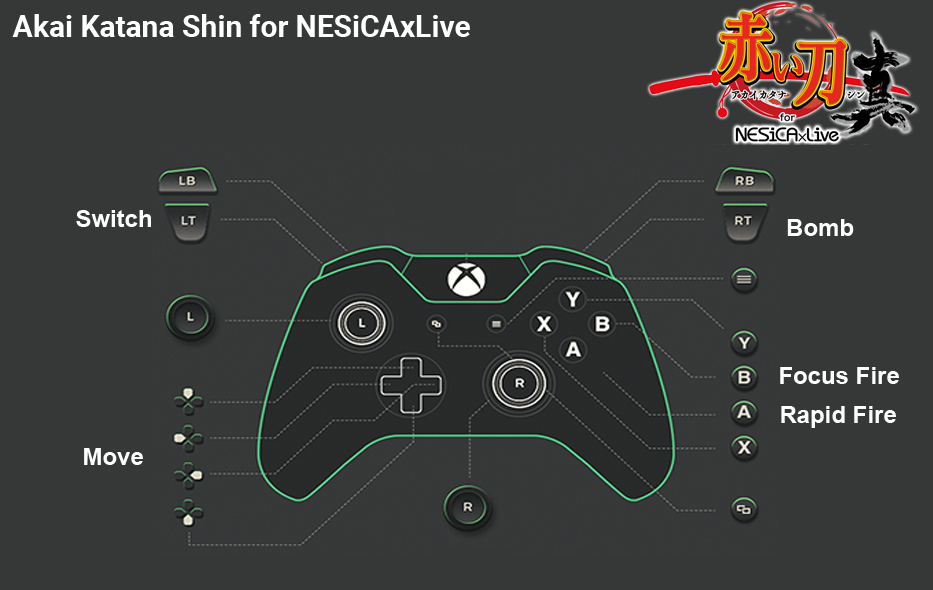
<style>
.page{position:relative;width:933px;height:590px;background:#363838}
.page>*{position:absolute;margin:0}
.t1{font:30px "Roboto-Bold";color:#ffffff}
.t2{font:24px "Arial-BoldMT";color:#fefefe}
</style>
<div class="page">
<p class="t1" style="left:12px;top:14px;width:458px;height:23px">Akai Katana Shin for NESiCAxLive</p>
<p class="t2" style="left:76px;top:210px;width:75px;height:17px">Switch</p>
<p class="t2" style="left:787px;top:219px;width:67px;height:17px">Bomb</p>
<p class="t2" style="left:780px;top:367px;width:119px;height:17px">Focus Fire</p>
<p class="t2" style="left:781px;top:406px;width:115px;height:22px">Rapid Fire</p>
<p class="t2" style="left:84px;top:448px;width:59px;height:17px">Move</p>
</div>
